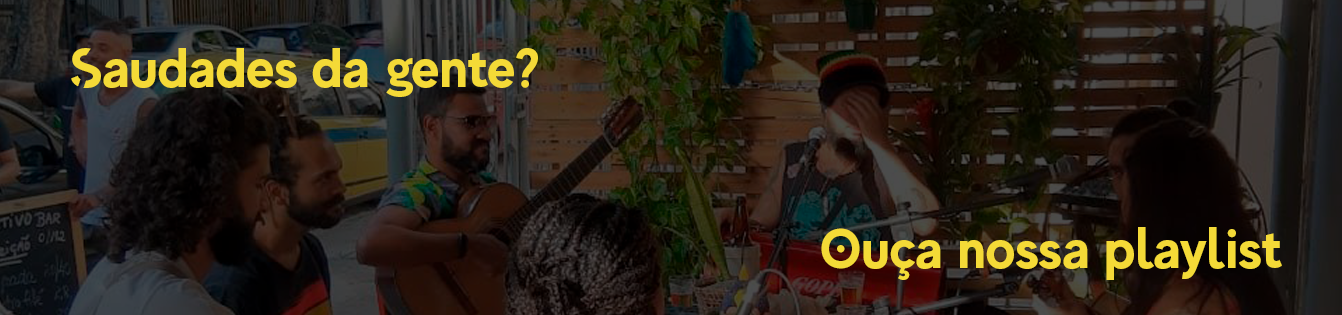
<style>
.page{position:relative;width:1342px;height:315px}
.page>*{position:absolute;margin:0}
.t1{font:55.6px "MADEEvolveSansEVO-Bold";color:#f4da37}
</style>
<div class="page">
<p class="t1" style="left:71px;top:48px;width:467px;height:49px">Saudades da gente?</p>
<p class="t1" style="left:821px;top:227px;width:461px;height:53px">Ouça nossa playlist</p>
</div>
